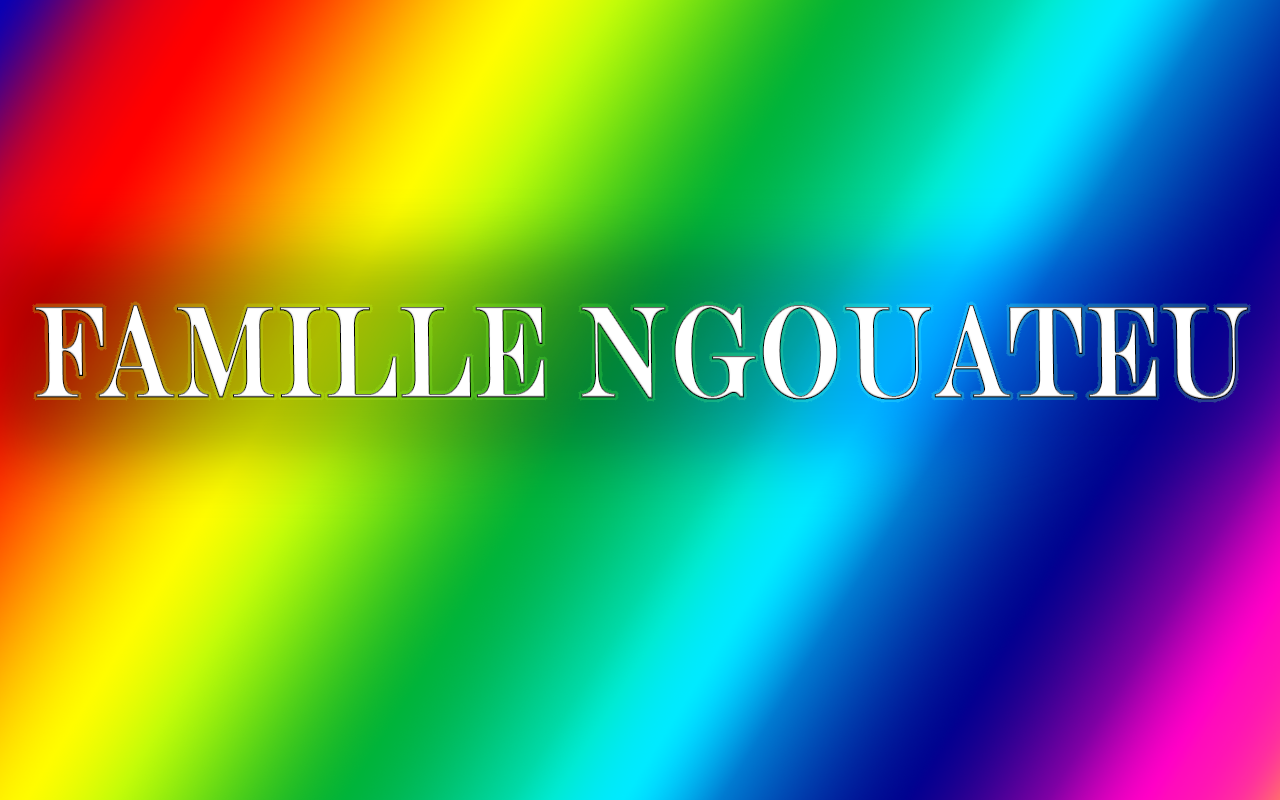
<style>
.page{position:relative;width:1280px;height:800px}
.page>*{position:absolute;margin:0}
.t1{font:131.3px "EngraversMT";color:#ffffff;font-weight:bold;scale:0.67 1}
</style>
<div class="page">
<p class="t1" style="left:35px;top:305px;width:1213px;height:95px">FAMILLE NGOUATEU</p>
</div>
